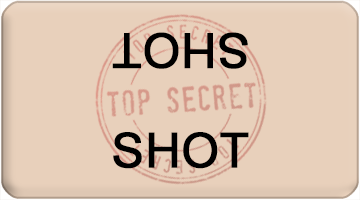
<style>
.page{position:relative;width:360px;height:200px;background:#e8d0bb}
.page>*{position:absolute;margin:0}
.t1{font:48px "ArialMT";color:#000000;font-weight:bold}
</style>
<div class="page">
<p class="t1" style="left:112px;top:32px;width:136px;height:37px;rotate:180deg">SHOT</p>
<p class="t1" style="left:113px;top:132px;width:136px;height:37px">SHOT</p>
</div>
